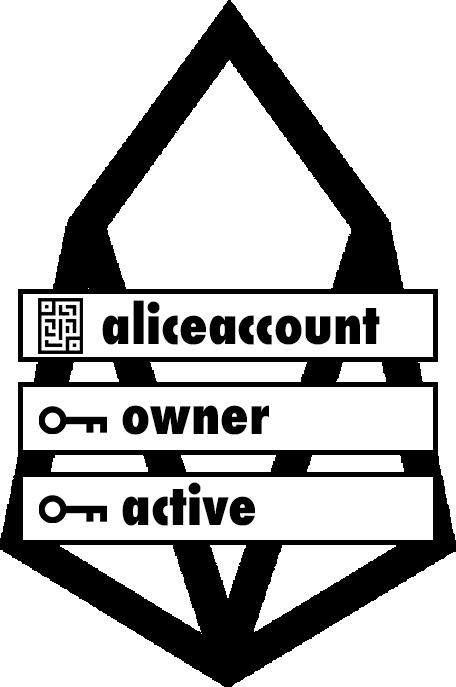
<style>
.page{position:relative;width:456px;height:687px;background:#ffffff}
.page>*{position:absolute;margin:0}
.t1{font:52.8px "Futura-CondensedExtraBold";color:#000000}
.t2{font:52.8px "Futura-CondensedExtraBold";color:#010101}
</style>
<div class="page">
<p class="t1" style="left:102px;top:300px;width:278px;height:45px">aliceaccount</p>
<p class="t2" style="left:122px;top:405px;width:147px;height:30px">owner</p>
<p class="t2" style="left:122px;top:482px;width:133px;height:44px">active</p>
</div>
